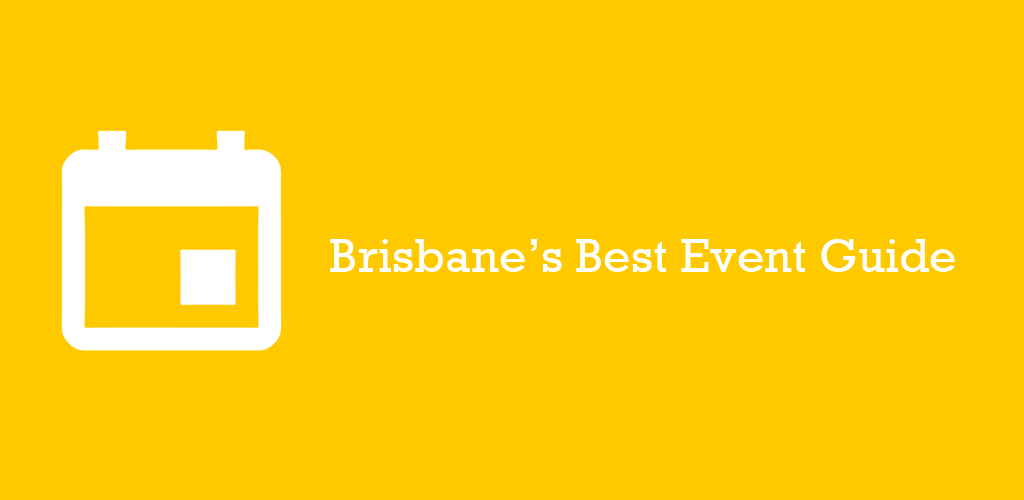
<style>
.page{position:relative;width:1024px;height:500px;background:#ffc900}
.page>*{position:absolute;margin:0}
.t1{font:48.5px "Rockwell";color:#ffffff}
</style>
<div class="page">
<p class="t1" style="left:330px;top:239px;width:625px;height:33px">Brisbane’s Best Event Guide</p>
</div>
